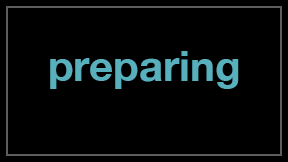
<style>
.page{position:relative;width:288px;height:162px;background:#000000}
.page>*{position:absolute;margin:0}
.t1{font:42px "HelveticaNeue-Bold";color:#58b0bd}
</style>
<div class="page">
<p class="t1" style="left:50px;top:51px;width:189px;height:38px">preparing</p>
</div>
